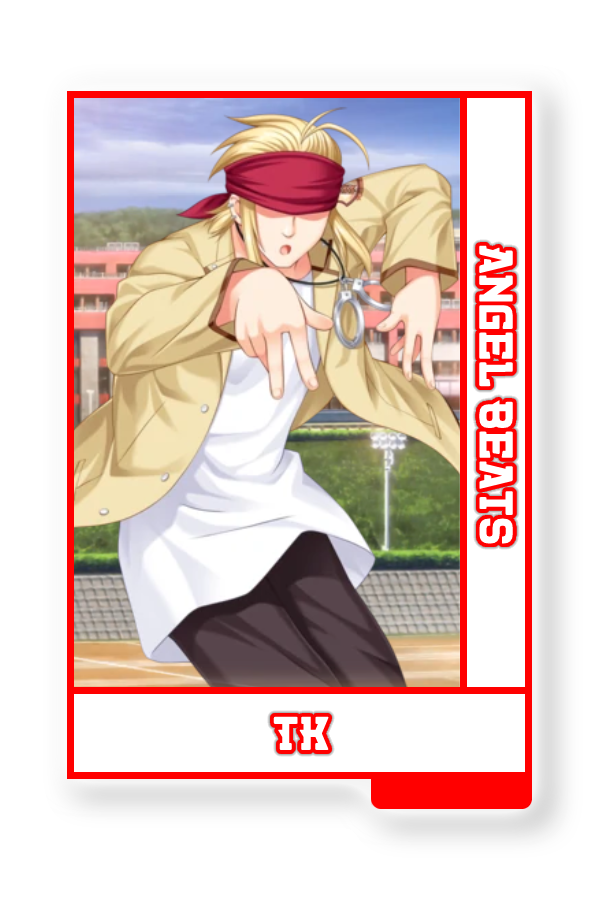
<style>
.page{position:relative;width:600px;height:900px;background:#ffffff}
.page>*{position:absolute;margin:0}
.t1{font:48.8px "KillerCollege";color:#ffffff}
.t2{font:48.6px "KillerCollege";color:#ffffff}
</style>
<div class="page">
<p class="t1" style="left:479px;top:245px;width:34px;height:299px;rotate:90deg">Angel Beats</p>
<p class="t2" style="left:273px;top:716px;width:56px;height:35px">TK</p>
</div>
